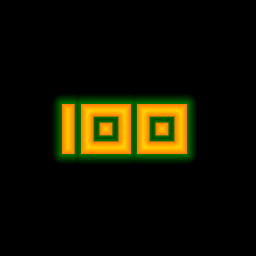
<style>
.page{position:relative;width:256px;height:256px;background:#000000}
.page>*{position:absolute;margin:0}
.t1{font:100px "Vermin-Vibes"}
</style>
<div class="page">
<p class="t1" style="left:62px;top:104px;width:125px;height:50px">100</p>
</div>
